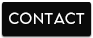
<style>
.page{position:relative;width:93px;height:38px;background:#0a0a0a}
.page>*{position:absolute;margin:0}
.t1{font:14px "LEMONMILK-Light";letter-spacing:0.05em;color:#ffffff}
</style>
<div class="page">
<p class="t1" style="left:9px;top:12px;width:76px;height:12px">contact</p>
</div>
